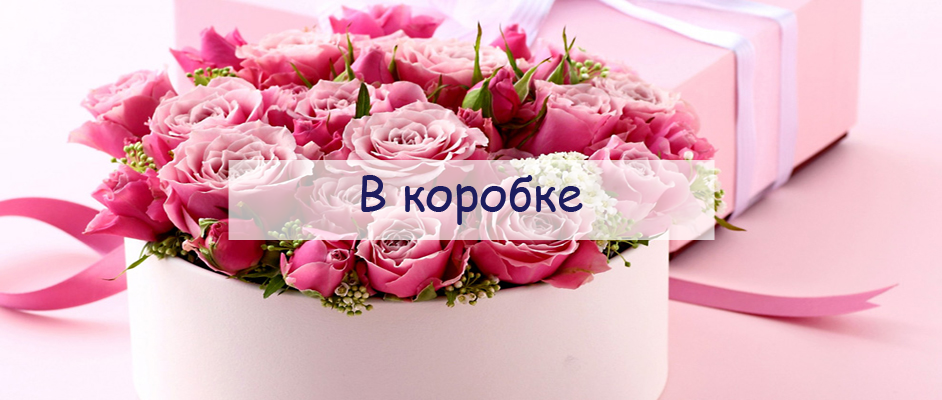
<style>
.page{position:relative;width:942px;height:400px}
.page>*{position:absolute;margin:0}
.t1{font:48px "ComicSansMS";color:#1d1c5e}
</style>
<div class="page">
<p class="t1" style="left:361px;top:175px;width:222px;height:50px">В коробке</p>
</div>
